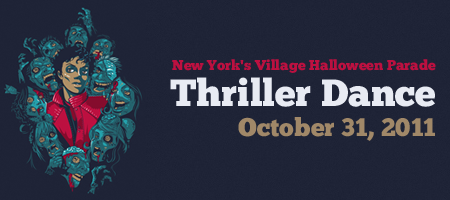
<style>
.page{position:relative;width:450px;height:200px;background:#1e2336}
.page>*{position:absolute;margin:0}
.t1{font:14.2px/19px "ChunkFive-Roman";color:#bc1040}
.t2{font:38px/35.9px "ChunkFive-Roman";color:#e8ebf3}
.t3{font:25.3px/29.5px "ChunkFive-Roman";color:#a18868}
</style>
<div class="page">
<p class="t1" style="left:170px;top:59px;width:266px;height:82px;text-align:right">New York's Village Halloween Parade<br><span class="t2">Thriller Dance<br></span><span class="t3">October 31, 2011</span></p>
</div>
